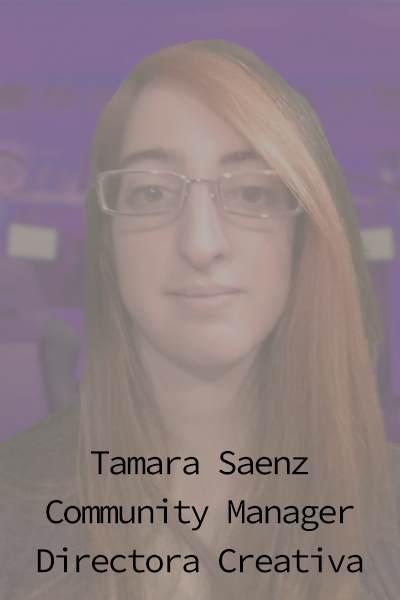
<style>
.page{position:relative;width:400px;height:600px}
.page>*{position:absolute;margin:0}
.t1{font:35px/49px "SourceCodePro-Regular";letter-spacing:-0.08em;color:#000000}
</style>
<div class="page">
<p class="t1" style="left:37px;top:450px;width:326px;height:123px;text-align:center">Tamara Saenz<br>Community Manager<br>Directora Creativa</p>
</div>
